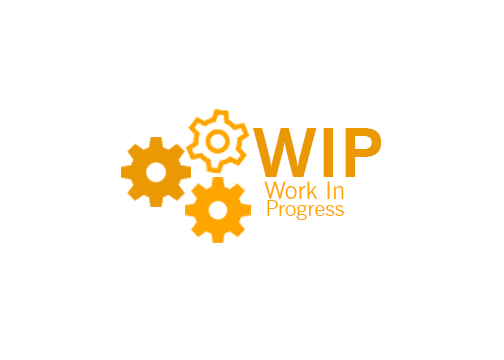
<style>
.page{position:relative;width:504px;height:360px;background:#ffffff}
.page>*{position:absolute;margin:0}
.t1{font:67.8px "NewsGothicBT-Bold";color:#ea9904}
.t2{font:24.4px "NewsGothicBT-Roman";color:#ffa500}
.t3{font:21.9px "NewsGothicBT-Roman";color:#ffa500}
</style>
<div class="page">
<p class="t1" style="left:253px;top:128px;width:129px;height:49px">WIP</p>
<p class="t2" style="left:264px;top:181px;width:80px;height:19px">Work In</p>
<p class="t3" style="left:267px;top:200px;width:77px;height:20px">Progress</p>
</div>
